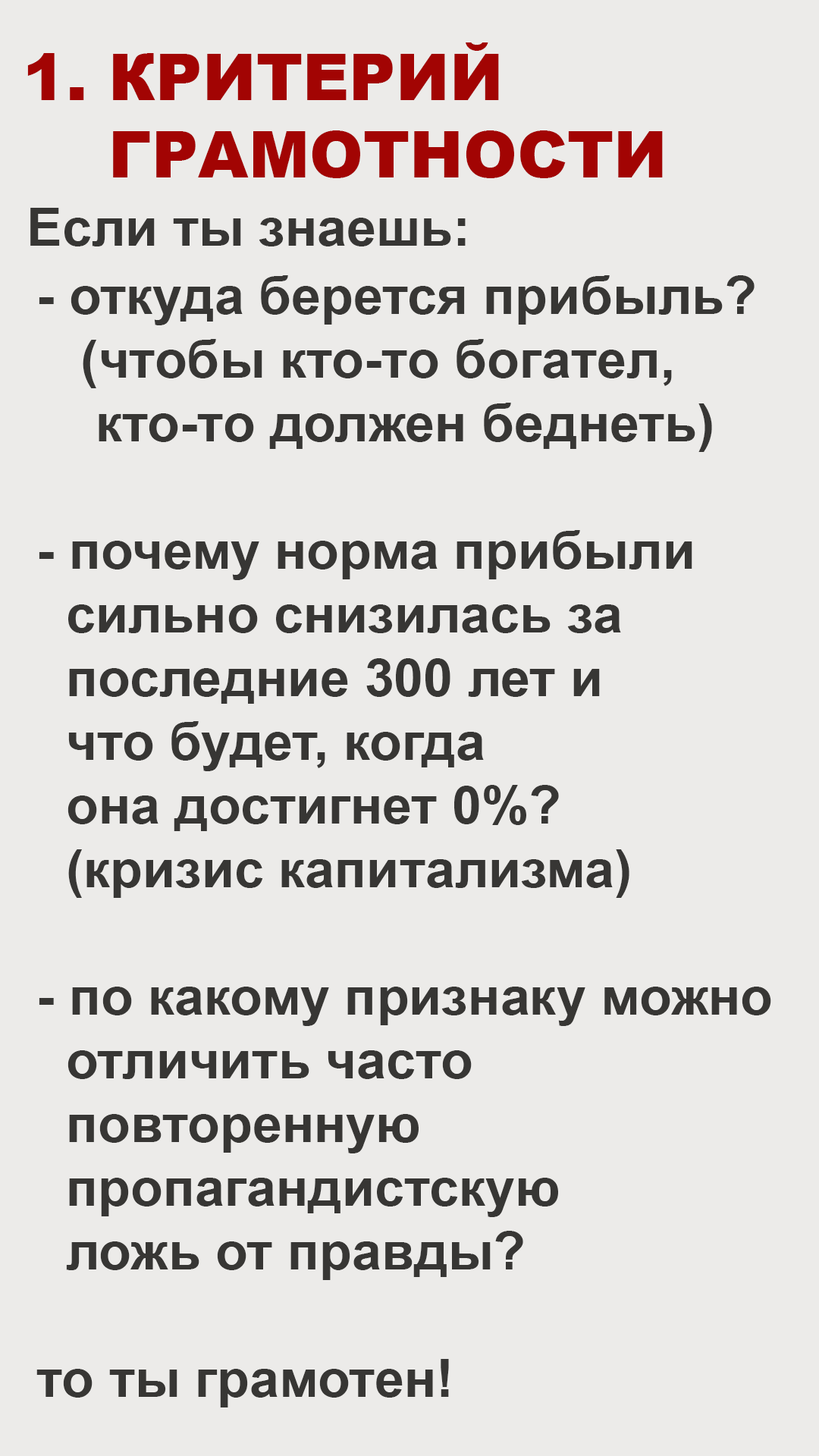
<style>
.page{position:relative;width:819px;height:1456px;background:#ecebe9}
.page>*{position:absolute;margin:0}
.t1{font:64.5px "Arial-Black";color:#a20403}
.t2{font:53.1px "Arial-BoldMT";color:#373634}
</style>
<div class="page">
<p class="t1" style="left:27px;top:42px;width:636px;height:136px">1. КРИТЕРИЙ <br>    ГРАМОТНОСТИ</p>
<p class="t2" style="left:30px;top:208px;width:436px;height:38px">Eсли ты знаешь:</p>
<p class="t2" style="left:36px;top:275px;width:735px;height:1132px">- откуда берется прибыль?<br>   (чтобы кто-то богател,<br>    кто-то должен беднеть)<br><br>- почему норма прибыли <br>  сильно снизилась за <br>  последние 300 лет и <br>  что будет, когда <br>  она достигнет 0%?<br>  (кризис капитализма)<br><br>- по какому признаку можно<br>  отличить часто <br>  повторенную <br>  пропагандистскую <br>  ложь от правды?<br><br>то ты грамотен!</p>
</div>
